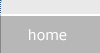
<style>
.page{position:relative;width:100px;height:53px;background:#b7b7b7}
.page>*{position:absolute;margin:0}
.t1{font:14px "Verdana";color:#ffffff}
</style>
<div class="page">
<p class="t1" style="left:29px;top:29px;width:38px;height:12px">home</p>
</div>
